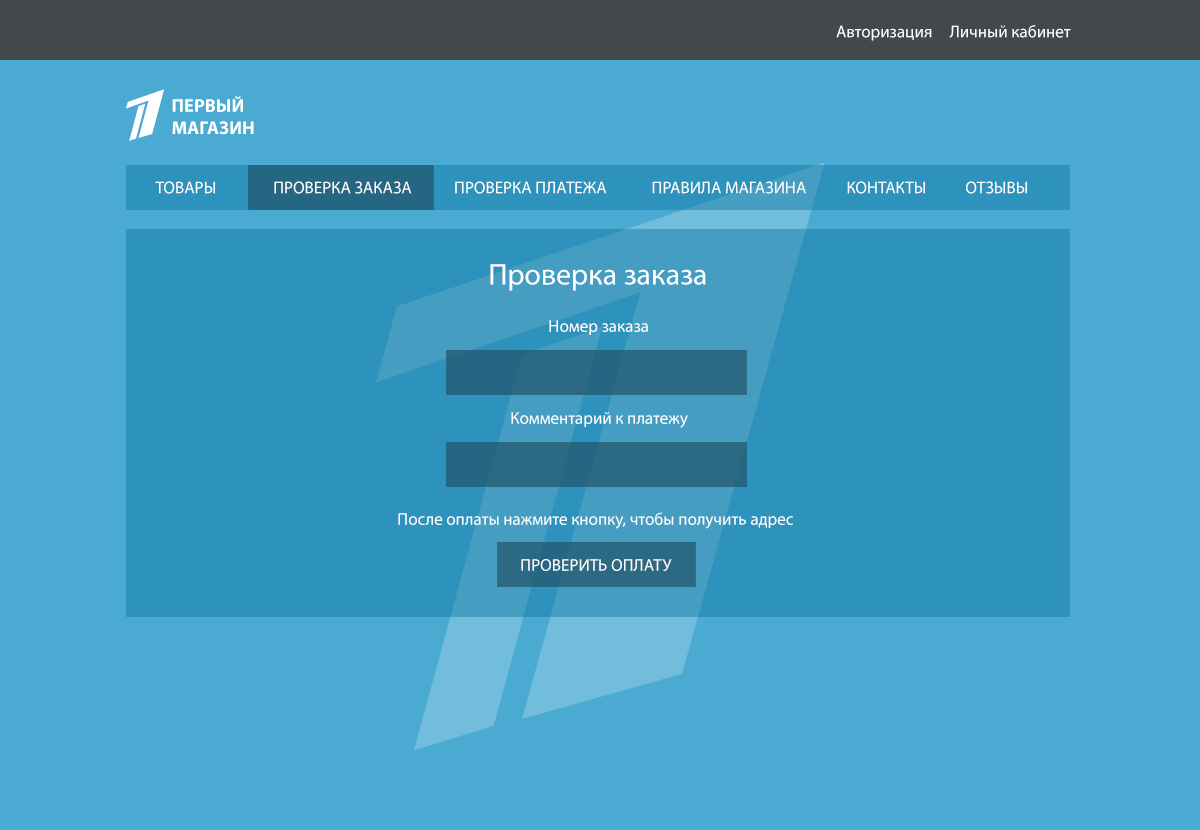
<style>
.page{position:relative;width:1200px;height:830px;background:#4aaad2}
.page>*{position:absolute;margin:0}
.t1{font:17px "MyriadPro-Regular";color:#ffffff}
.t2{font:18.5px "MyriadPro-Bold";color:#ffffff;text-transform:uppercase}
.t3{font:30px "MyriadPro-Regular";color:#ffffff}
.t4{font:17px "MyriadPro-Regular";color:#ffffff;text-transform:uppercase}
</style>
<div class="page">
<p class="t1" style="left:836px;top:25px;width:96px;height:16px">Авторизация</p>
<p class="t1" style="left:949px;top:25px;width:122px;height:13px">Личный кабинет</p>
<p class="t2" style="left:172px;top:96px;width:82px;height:39px">Первый <br>магазин</p>
<p class="t1" style="left:155px;top:181px;width:60px;height:13px">ТОВАРЫ</p>
<p class="t1" style="left:274px;top:181px;width:138px;height:13px">ПРОВЕРКА ЗАКАЗА</p>
<p class="t1" style="left:455px;top:181px;width:152px;height:13px">ПРОВЕРКА ПЛАТЕЖА</p>
<p class="t1" style="left:652px;top:181px;width:154px;height:13px">ПРАВИЛА МАГАЗИНА</p>
<p class="t1" style="left:847px;top:181px;width:78px;height:13px">КОНТАКТЫ</p>
<p class="t1" style="left:966px;top:181px;width:61px;height:13px">ОТЗЫВЫ</p>
<p class="t3" style="left:490px;top:264px;width:216px;height:27px">Проверка заказа</p>
<p class="t1" style="left:549px;top:320px;width:99px;height:15px">Номер заказа</p>
<p class="t1" style="left:511px;top:412px;width:177px;height:16px">Комментарий к платежу</p>
<p class="t1" style="left:398px;top:512px;width:395px;height:17px">После оплаты нажмите кнопку, чтобы получить адрес</p>
<p class="t4" style="left:521px;top:559px;width:151px;height:12px">Проверить оплату</p>
</div>
